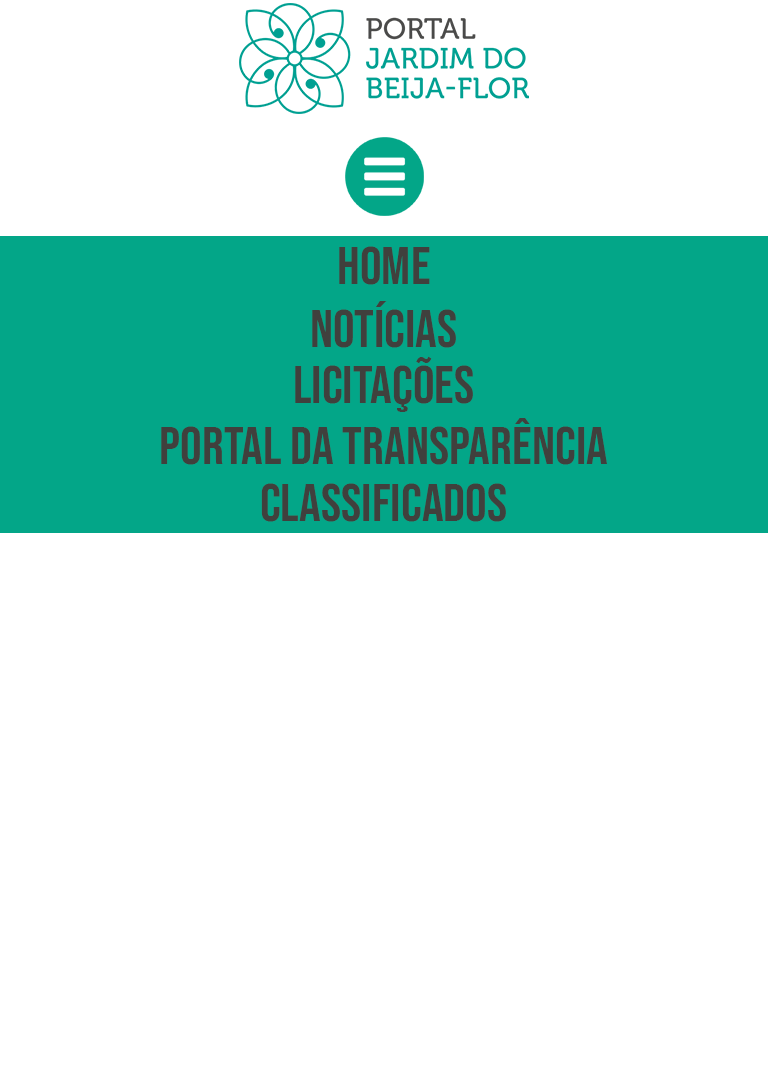
<style>
.page{position:relative;width:768px;height:1080px;background:#ffffff}
.page>*{position:absolute;margin:0}
.t1{font:54.3px "BebasNeue-Regular";color:#40403d}
</style>
<div class="page">
<p class="t1" style="left:339px;top:246px;width:91px;height:39px">HOME</p>
<p class="t1" style="left:312px;top:301px;width:144px;height:47px">NOTÍCIAS</p>
<p class="t1" style="left:295px;top:356px;width:178px;height:56px">LICITAÇÕES</p>
<p class="t1" style="left:161px;top:418px;width:446px;height:47px">PORTAL DA TRANSPARÊNCIA</p>
<p class="t1" style="left:261px;top:483px;width:245px;height:39px">CLASSIFICADOS</p>
</div>
